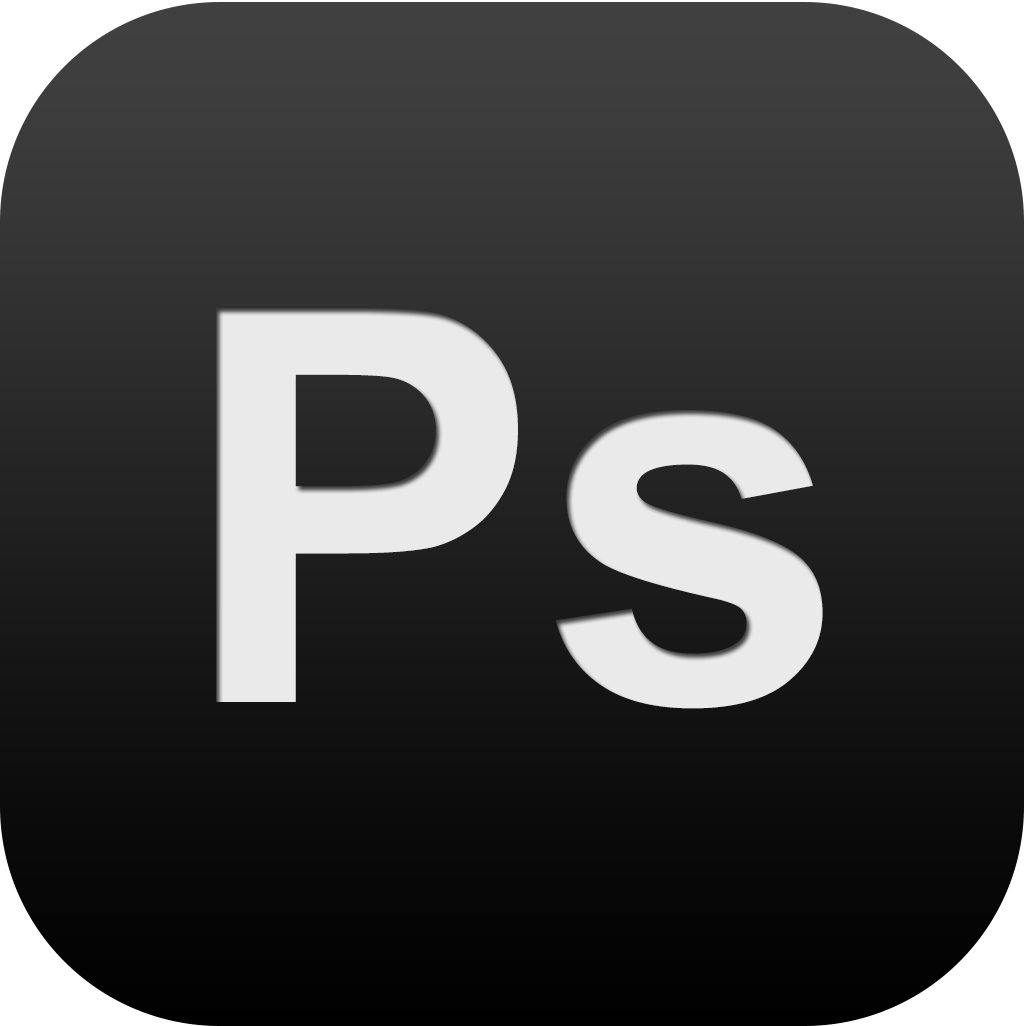
<style>
.page{position:relative;width:1026px;height:1026px}
.page>*{position:absolute;margin:0}
.t1{font:550px "Arial-BoldMT";color:#eaeaea}
</style>
<div class="page">
<p class="t1" style="left:216px;top:308px;width:607px;height:401px">Ps</p>
</div>
